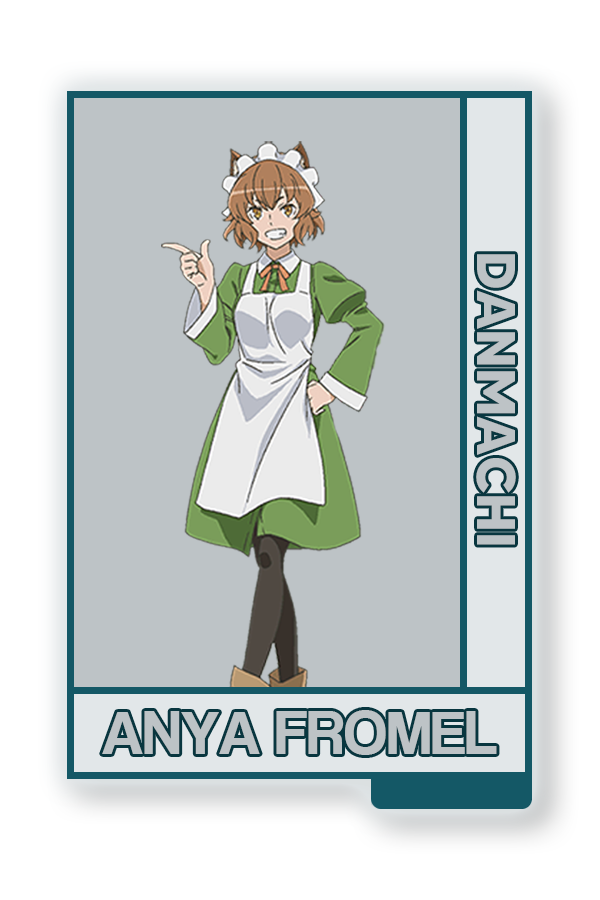
<style>
.page{position:relative;width:600px;height:900px;background:#bdc3c6}
.page>*{position:absolute;margin:0}
.t1{font:54.4px "MADETOMMY-Bold";color:#bdc3c6}
.t2{font:63.7px "CoolveticaRg-Regular";color:#bdc3c6}
</style>
<div class="page">
<p class="t1" style="left:476px;top:254px;width:40px;height:291px;rotate:90deg">DANMACHI</p>
<p class="t2" style="left:102px;top:710px;width:395px;height:45px">ANYA FROMEL</p>
</div>
